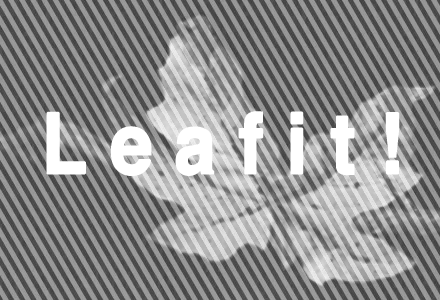
<style>
.page{position:relative;width:440px;height:300px}
.page>*{position:absolute;margin:0}
.t1{font:83.9px "Helvetica-Bold";letter-spacing:0.3em;color:#ffffff;font-weight:bold;scale:0.87 1}
</style>
<div class="page">
<p class="t1" style="left:46px;top:111px;width:354px;height:65px">Leafit!</p>
</div>
